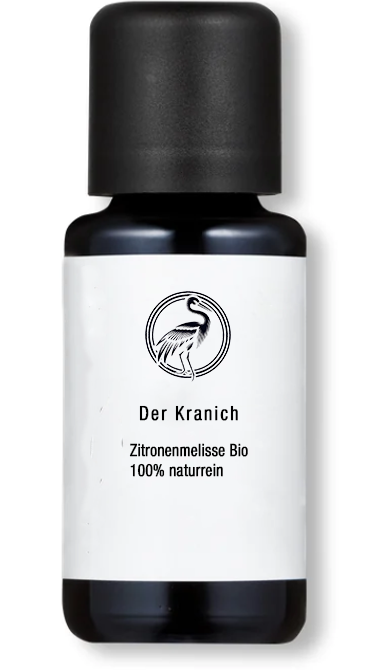
<style>
.page{position:relative;width:380px;height:670px;background:#ffffff}
.page>*{position:absolute;margin:0}
.t1{font:19.7px "HelveticaNeueLTPro-Cn";letter-spacing:0.1em;color:#000000;font-weight:bold;scale:0.9 1}
.t2{font:16.9px "HelveticaNeueLTPro-Cn";color:#000000;font-weight:bold;scale:0.9 1}
</style>
<div class="page">
<p class="t1" style="left:139px;top:405px;width:99px;height:16px">Der Kranich</p>
<p class="t2" style="left:129px;top:443px;width:119px;height:34px">Zitronenmelisse Bio <br>100% naturrein</p>
</div>
